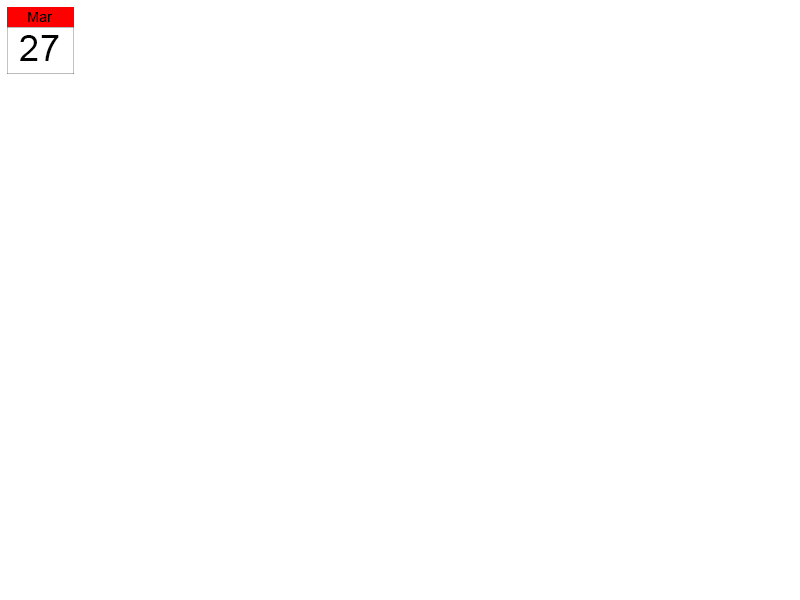
<style>
.page{position:relative;width:800px;height:600px;background:#ffffff}
.page>*{position:absolute;margin:0}
.t1{font:14.4px "ArialMT";letter-spacing:0.02em;color:#000000;scale:0.97 1}
.t2{font:36.4px "ArialMT";letter-spacing:0.02em;color:#000000}
</style>
<div class="page">
<p class="t1" style="left:28px;top:12px;width:25px;height:10px">Mar</p>
<p class="t2" style="left:20px;top:35px;width:39px;height:26px">27</p>
</div>
